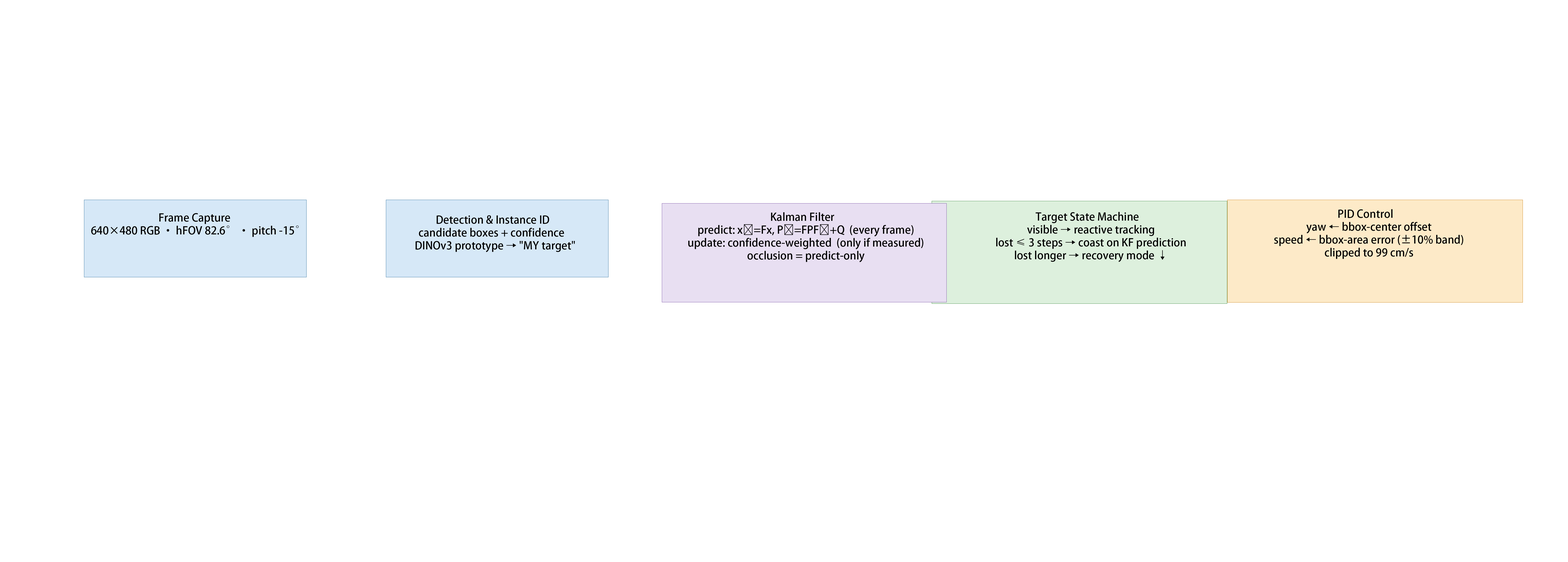
<style>
.page{position:relative;width:1568px;height:562px;background:#ffffff}
.page>*{position:absolute;margin:0}
.t1{font:10.7px "AdobeHeitiStd-Regular";color:#000000}
</style>
<div class="page">
<p class="t1" style="left:1274px;top:209px;width:189px;height:50px;text-align:center">PID Control<br>   yaw ← bbox-center offset<br>   speed ← bbox-area error (±10% band)<br>   clipped to 99 cm/s</p>
<p class="t1" style="left:91px;top:213px;width:208px;height:24px;text-align:center">Frame Capture<br>   640×480 RGB · hFOV 82.6° · pitch -15°</p>
<p class="t1" style="left:415px;top:215px;width:160px;height:37px;text-align:center">Detection &amp; Instance ID<br>candidate boxes + confidence<br>   DINOv3 prototype → "MY target"</p>
<p class="t1" style="left:688px;top:212px;width:235px;height:50px;text-align:center">Kalman Filter<br>   predict: x⁻=Fx, P⁻=FPFᵀ+Q  (every frame)<br>   update: confidence-weighted  (only if measured)<br>   occlusion = predict-only</p>
<p class="t1" style="left:996px;top:212px;width:190px;height:50px;text-align:center">Target State Machine<br>   visible → reactive tracking<br>   lost ≤ 3 steps → coast on KF prediction<br>   lost longer → recovery mode ↓</p>
</div>
